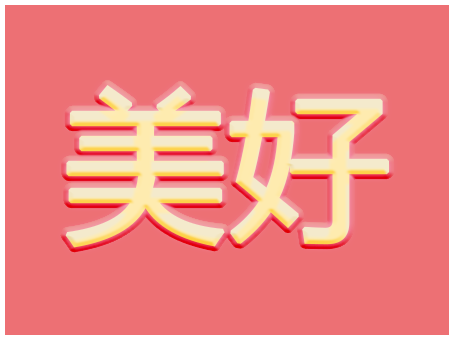
<style>
.page{position:relative;width:454px;height:340px;background:#ed7074}
.page>*{position:absolute;margin:0}
.t1{font:160px "MicrosoftYaHei";font-weight:bold}
</style>
<div class="page">
<p class="t1" style="left:65px;top:85px;width:324px;height:163px">美好</p>
</div>
